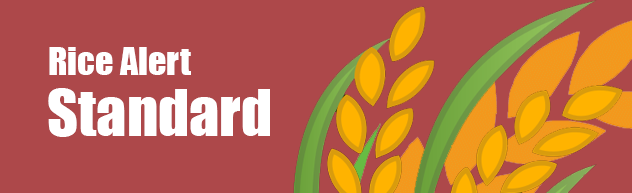
<style>
.page{position:relative;width:632px;height:193px;background:#ad484a}
.page>*{position:absolute;margin:0}
.t1{font:36px "Impact";color:#ffffff}
.t2{font:60px "Impact";color:#ffffff}
</style>
<div class="page">
<p class="t1" style="left:49px;top:47px;width:142px;height:28px">Rice Alert</p>
<p class="t2" style="left:48px;top:88px;width:222px;height:49px">Standard</p>
</div>
